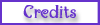
<style>
.page{position:relative;width:100px;height:25px;background:#ffffff}
.page>*{position:absolute;margin:0}
.t1{font:20px "MaracaExtraBold";letter-spacing:-0.005em;color:#6633cc}
</style>
<div class="page">
<p class="t1" style="left:23px;top:5px;width:53px;height:13px">Credits</p>
</div>
